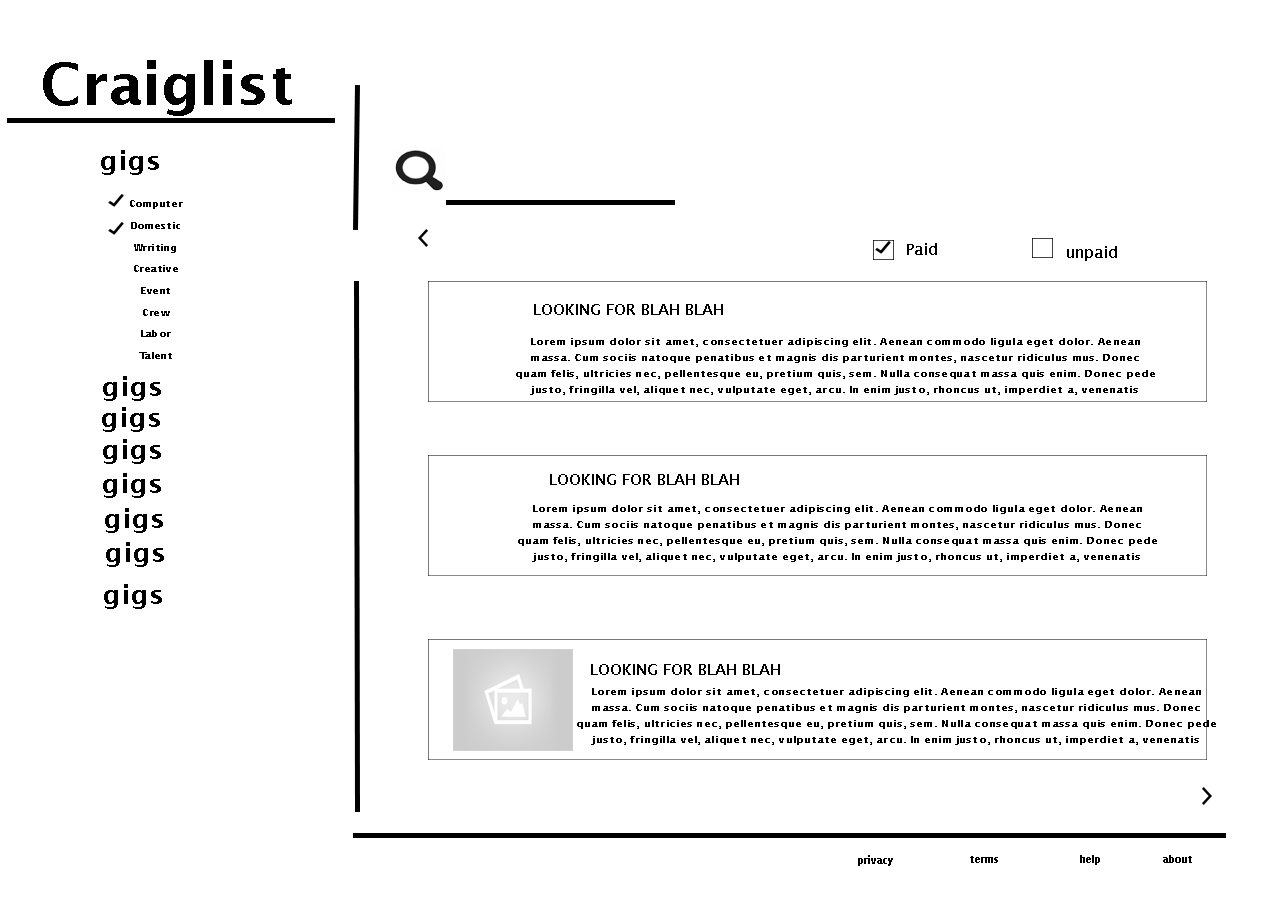
<style>
.page{position:relative;width:1280px;height:900px;background:#ffffff}
.page>*{position:absolute;margin:0}
.t1{font:27px "LucidaSans-Demi";color:#000000}
.t2{font:9.4px/21.7px "LucidaSans-Demi";color:#000000;scale:1.11 1}
.t3{font:15px "LucidaSans-Demi";color:#000000}
.t4{font:8.7px/16.1px "LucidaSans-Demi";color:#000000;scale:1.31 1}
</style>
<div class="page">
<p class="t1" style="left:101px;top:150px;width:58px;height:25px">gigs</p>
<p class="t2" style="left:130px;top:200px;width:53px;height:159px;text-align:center">Computer<br>Domestic<br>Wrriting<br>Creative<br>Event<br>Crew<br>Labor<br>Talent</p>
<p class="t3" style="left:907px;top:243px;width:30px;height:12px">Paid</p>
<p class="t3" style="left:1067px;top:246px;width:50px;height:15px">unpaid</p>
<p class="t3" style="left:534px;top:304px;width:189px;height:11px">LOOKING FOR BLAH BLAH</p>
<p class="t4" style="left:516px;top:338px;width:639px;height:57px;text-align:center">Lorem ipsum dolor sit amet, consectetuer adipiscing elit. Aenean commodo ligula eget dolor. Aenean massa. Cum sociis natoque penatibus et magnis dis parturient montes, nascetur ridiculus mus. Donec quam felis, ultricies nec, pellentesque eu, pretium quis, sem. Nulla consequat massa quis enim. Donec pede justo, fringilla vel, aliquet nec, vulputate eget, arcu. In enim justo, rhoncus ut, imperdiet a, venenatis vitae, justo.</p>
<p class="t1" style="left:103px;top:376px;width:58px;height:25px">gigs</p>
<p class="t1" style="left:102px;top:407px;width:58px;height:25px">gigs</p>
<p class="t1" style="left:103px;top:439px;width:58px;height:25px">gigs</p>
<p class="t1" style="left:103px;top:473px;width:58px;height:25px">gigs</p>
<p class="t3" style="left:550px;top:474px;width:189px;height:11px">LOOKING FOR BLAH BLAH</p>
<p class="t1" style="left:105px;top:508px;width:58px;height:25px">gigs</p>
<p class="t4" style="left:518px;top:505px;width:639px;height:57px;text-align:center">Lorem ipsum dolor sit amet, consectetuer adipiscing elit. Aenean commodo ligula eget dolor. Aenean massa. Cum sociis natoque penatibus et magnis dis parturient montes, nascetur ridiculus mus. Donec quam felis, ultricies nec, pellentesque eu, pretium quis, sem. Nulla consequat massa quis enim. Donec pede justo, fringilla vel, aliquet nec, vulputate eget, arcu. In enim justo, rhoncus ut, imperdiet a, venenatis vitae, justo.</p>
<p class="t1" style="left:106px;top:542px;width:58px;height:25px">gigs</p>
<p class="t1" style="left:104px;top:584px;width:58px;height:25px">gigs</p>
<p class="t3" style="left:591px;top:664px;width:189px;height:11px">LOOKING FOR BLAH BLAH</p>
<p class="t4" style="left:577px;top:688px;width:639px;height:57px;text-align:center">Lorem ipsum dolor sit amet, consectetuer adipiscing elit. Aenean commodo ligula eget dolor. Aenean massa. Cum sociis natoque penatibus et magnis dis parturient montes, nascetur ridiculus mus. Donec quam felis, ultricies nec, pellentesque eu, pretium quis, sem. Nulla consequat massa quis enim. Donec pede justo, fringilla vel, aliquet nec, vulputate eget, arcu. In enim justo, rhoncus ut, imperdiet a, venenatis vitae, justo.</p>
</div>
